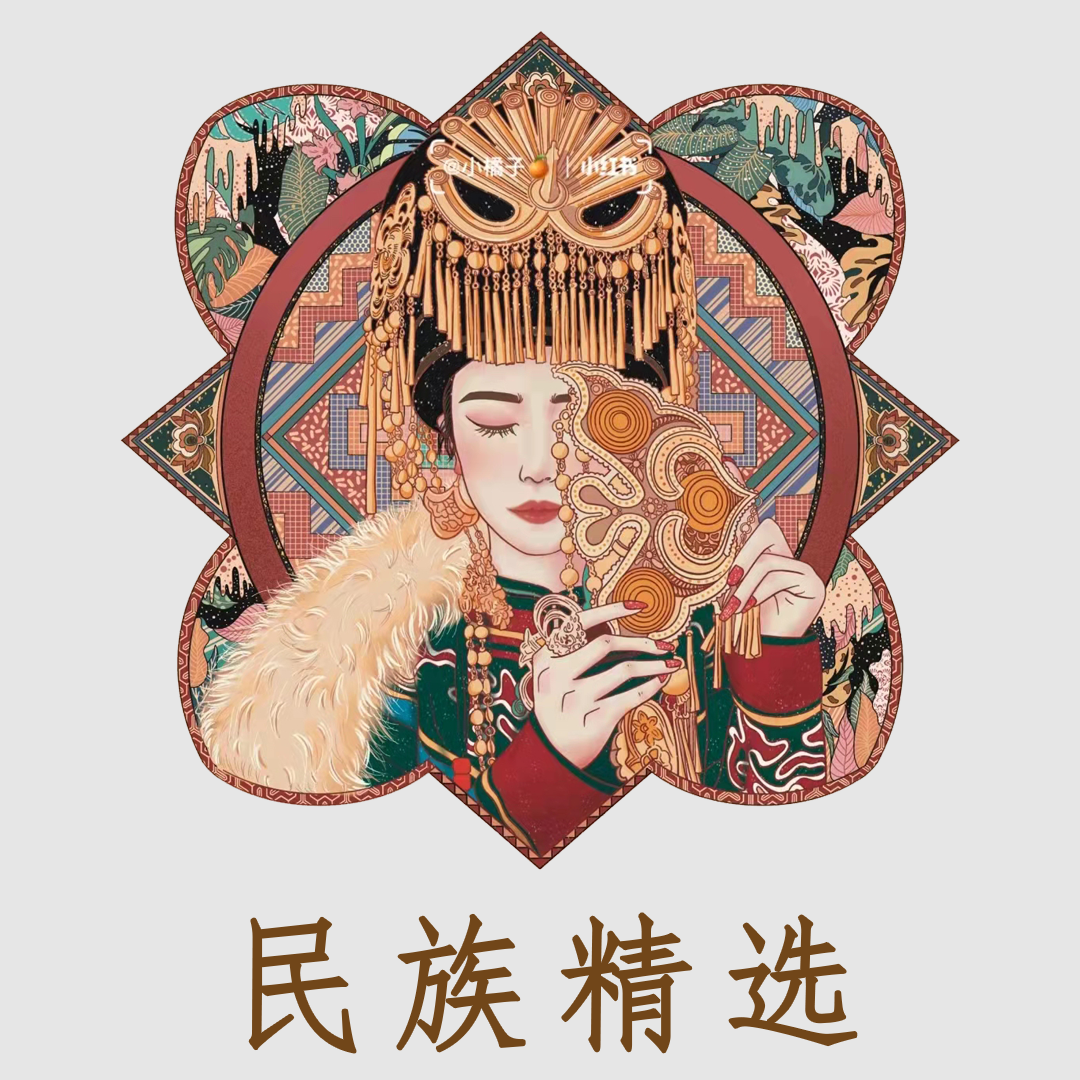
<style>
.page{position:relative;width:1080px;height:1080px;background:#e6e6e6}
.page>*{position:absolute;margin:0}
.t1{font:146.9px "FangSong";letter-spacing:0.1em;color:#714619;font-weight:bold}
</style>
<div class="page">
<p class="t1" style="left:250px;top:914px;width:606px;height:138px">民族精选</p>
</div>
